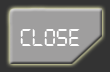
<style>
.page{position:relative;width:110px;height:72px;background:#9f9e9e}
.page>*{position:absolute;margin:0}
.t1{font:26px "DS-Digital";letter-spacing:-0.025em;color:#ffffff}
</style>
<div class="page">
<p class="t1" style="left:20px;top:29px;width:60px;height:17px">close</p>
</div>
